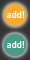
<style>
.page{position:relative;width:30px;height:60px}
.page>*{position:absolute;margin:0}
.t1{font:8px "AdobeHeitiStd-Regular";letter-spacing:0.05em;color:#ffffff}
</style>
<div class="page">
<p class="t1" style="left:7px;top:11px;width:17px;height:7px">add!</p>
<p class="t1" style="left:7px;top:41px;width:17px;height:7px">add!</p>
</div>
